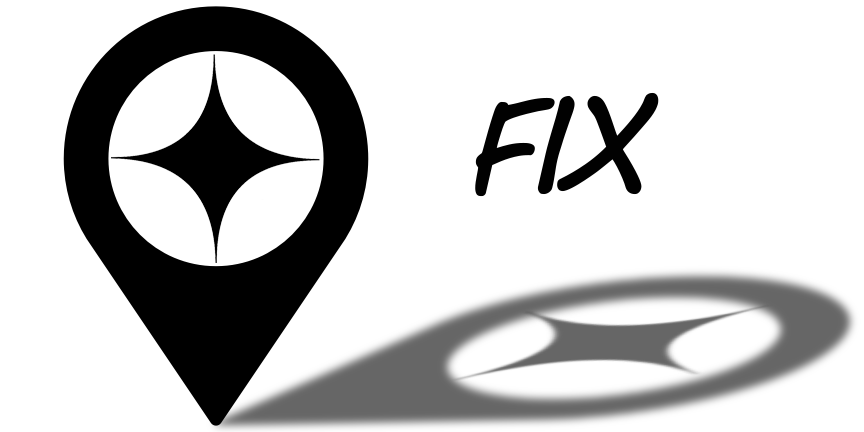
<style>
.page{position:relative;width:864px;height:432px;background:#ffffff}
.page>*{position:absolute;margin:0}
.t1{font:130px "MVBoli";letter-spacing:-0.05em;color:#010101;font-weight:bold}
</style>
<div class="page">
<p class="t1" style="left:475px;top:92px;width:184px;height:105px">FIX</p>
</div>
